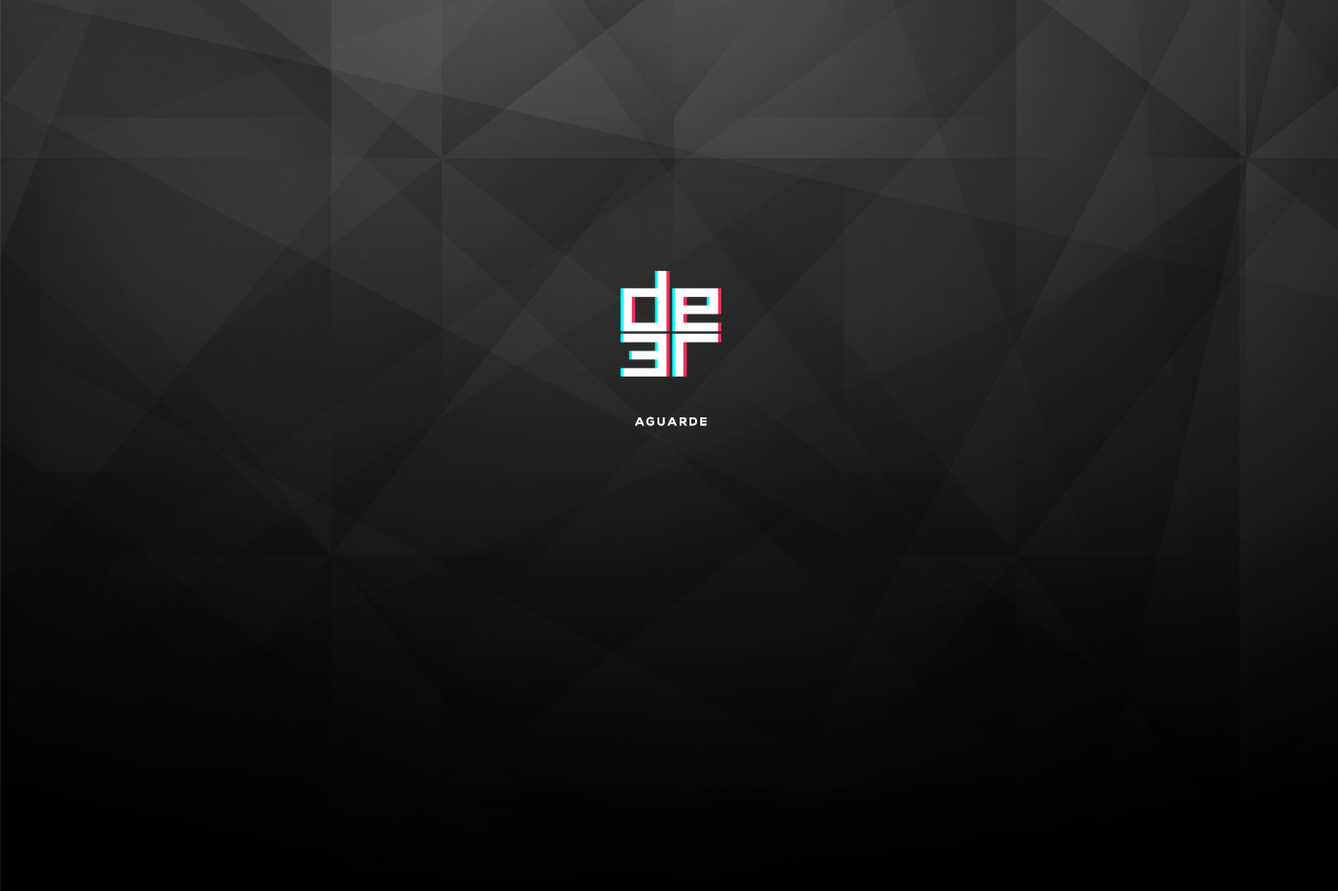
<style>
.page{position:relative;width:1338px;height:891px}
.page>*{position:absolute;margin:0}
.t1{font:11.4px "NexaBold";letter-spacing:0.22em;color:#ffffff;text-transform:uppercase}
</style>
<div class="page">
<p class="t1" style="left:635px;top:417px;width:72px;height:9px">AGUARDE</p>
</div>
